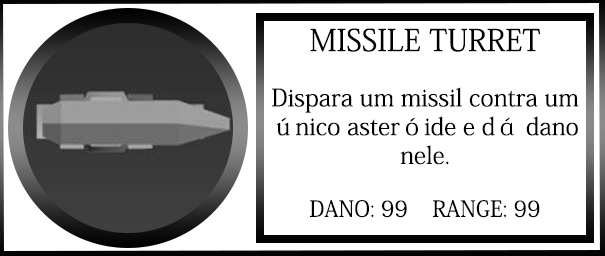
<style>
.page{position:relative;width:605px;height:256px;background:#ffffff}
.page>*{position:absolute;margin:0}
.t1{font:24px "AdobeKaitiStd-Regular";color:#000000}
.t2{font:30px "AdobeKaitiStd-Regular";color:#000000}
.t3{font:22px "AdobeKaitiStd-Regular";color:#000000}
</style>
<div class="page">
<p class="t1" style="left:272px;top:28px;width:307px;height:190px;text-align:center"><span class="t2">MISSILE TURRET<br><br></span>Dispara um missil contra um único asteróide e dá dano nele.<br><span class="t3"><br>DANO: 99    RANGE: 99</span></p>
</div>
